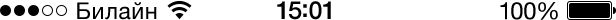
<style>
.page{position:relative;width:616px;height:20px;background:#ffffff}
.page>*{position:absolute;margin:0}
.t1{font:23px "HelveticaNeue";letter-spacing:0.02em;color:#000000}
.t2{font:25px "HelveticaNeue-Medium";color:#000000}
.t3{font:24px "HelveticaNeue";letter-spacing:-0.02em;color:#010101}
</style>
<div class="page">
<p class="t1" style="left:77px;top:2px;width:80px;height:18px">Билайн</p>
<p class="t2" style="left:277px;top:1px;width:54px;height:19px">15:01</p>
<p class="t3" style="left:500px;top:2px;width:58px;height:18px">100%</p>
</div>
